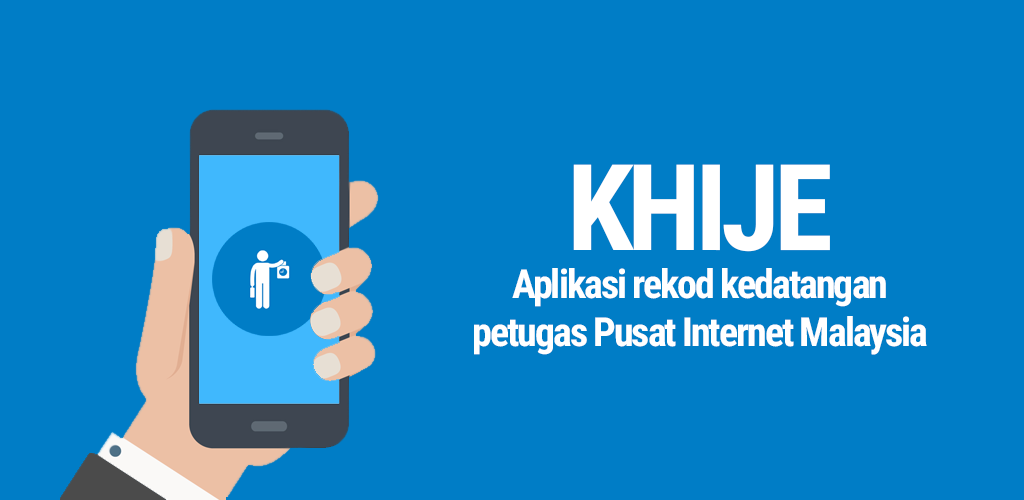
<style>
.page{position:relative;width:1024px;height:500px;background:#007dc6}
.page>*{position:absolute;margin:0}
.t1{font:40px "RobotoCondensed-Bold";letter-spacing:-0.05em;color:#ffffff}
.t2{font:120px "RobotoCondensed-Bold";letter-spacing:-0.05em;color:#ffffff}
</style>
<div class="page">
<p class="t1" style="left:474px;top:164px;width:453px;height:191px;text-align:center"><span class="t2">KHIJE<br></span>Aplikasi rekod kedatangan <br>petugas Pusat Internet Malaysia</p>
</div>
